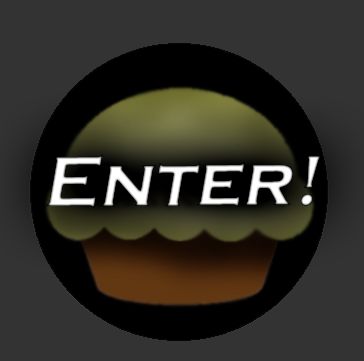
<style>
.page{position:relative;width:364px;height:361px;background:#333333}
.page>*{position:absolute;margin:0}
.t1{font:73.3px "CopperplateGothic-Bold";font-style:italic}
</style>
<div class="page">
<p class="t1" style="left:46px;top:154px;width:276px;height:54px">Enter!</p>
</div>
